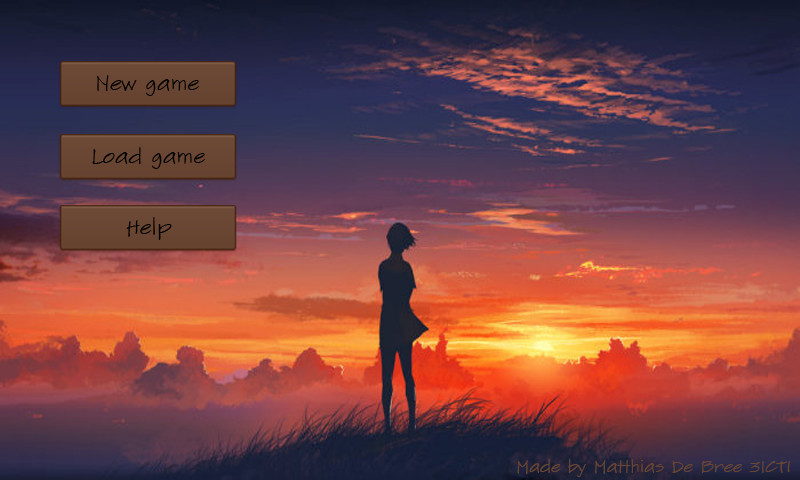
<style>
.page{position:relative;width:800px;height:480px}
.page>*{position:absolute;margin:0}
.t1{font:20.8px "SketchFlowPrint";color:#010101}
.t2{font:20.8px "SketchFlowPrint";color:#000000}
.t3{font:16.7px "SketchFlowPrint";color:#684633}
</style>
<div class="page">
<p class="t1" style="left:97px;top:75px;width:103px;height:21px">New game</p>
<p class="t2" style="left:92px;top:147px;width:114px;height:22px">Load game</p>
<p class="t2" style="left:126px;top:217px;width:46px;height:23px">Help</p>
<p class="t3" style="left:517px;top:459px;width:273px;height:18px">Made by Matthias De Bree 3ICT1</p>
</div>
